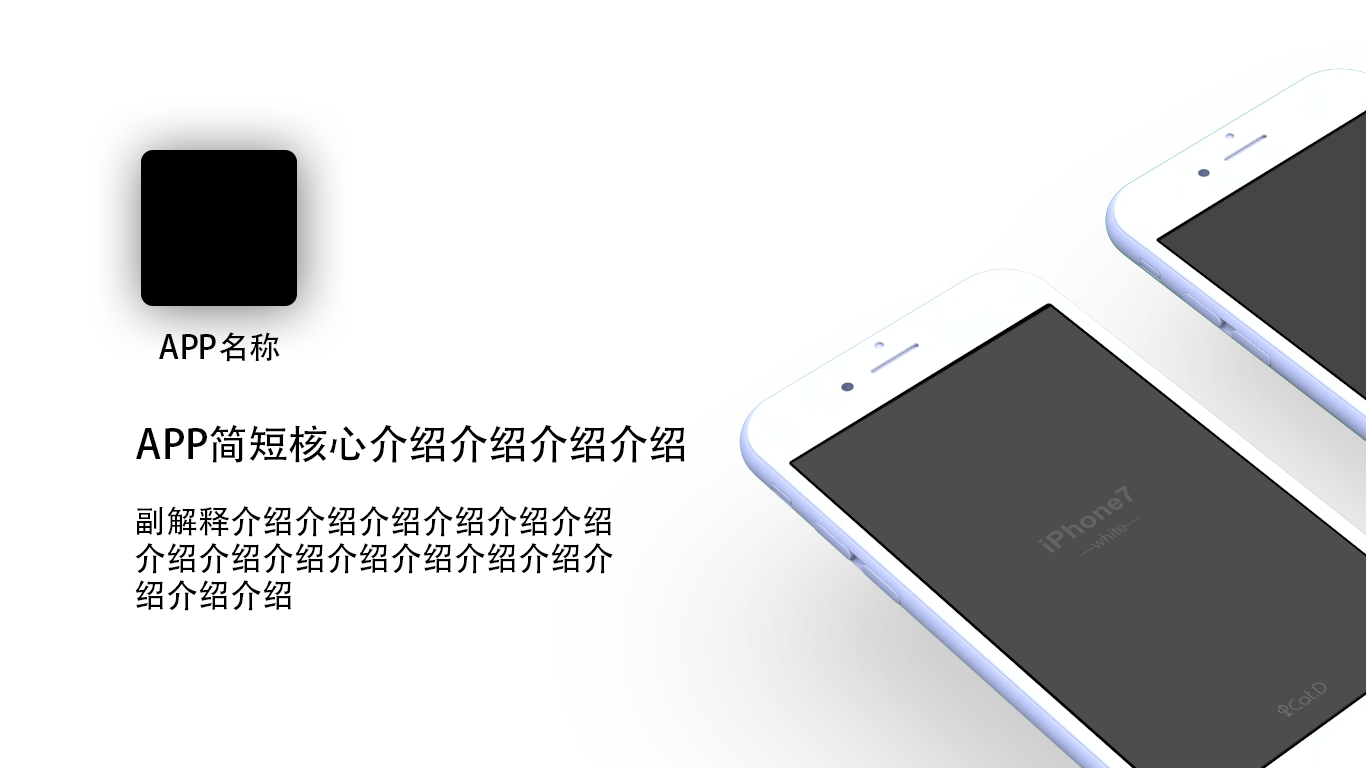
<style>
.page{position:relative;width:1366px;height:768px;background:#ffffff}
.page>*{position:absolute;margin:0}
.t1{font:32px "AdobeHeitiStd-Regular";color:#000000}
.t2{font:40px "AdobeHeitiStd-Regular";color:#000000}
.t3{font:32px/37px "AdobeHeitiStd-Regular";color:#000000}
</style>
<div class="page">
<p class="t1" style="left:159px;top:332px;width:121px;height:30px">APP名称</p>
<p class="t2" style="left:136px;top:424px;width:549px;height:39px">APP简短核心介绍介绍介绍介绍</p>
<p class="t3" style="left:135px;top:506px;width:478px;height:105px">副解释介绍介绍介绍介绍介绍介绍<br>介绍介绍介绍介绍介绍介绍介绍介<br>绍介绍介绍</p>
</div>
